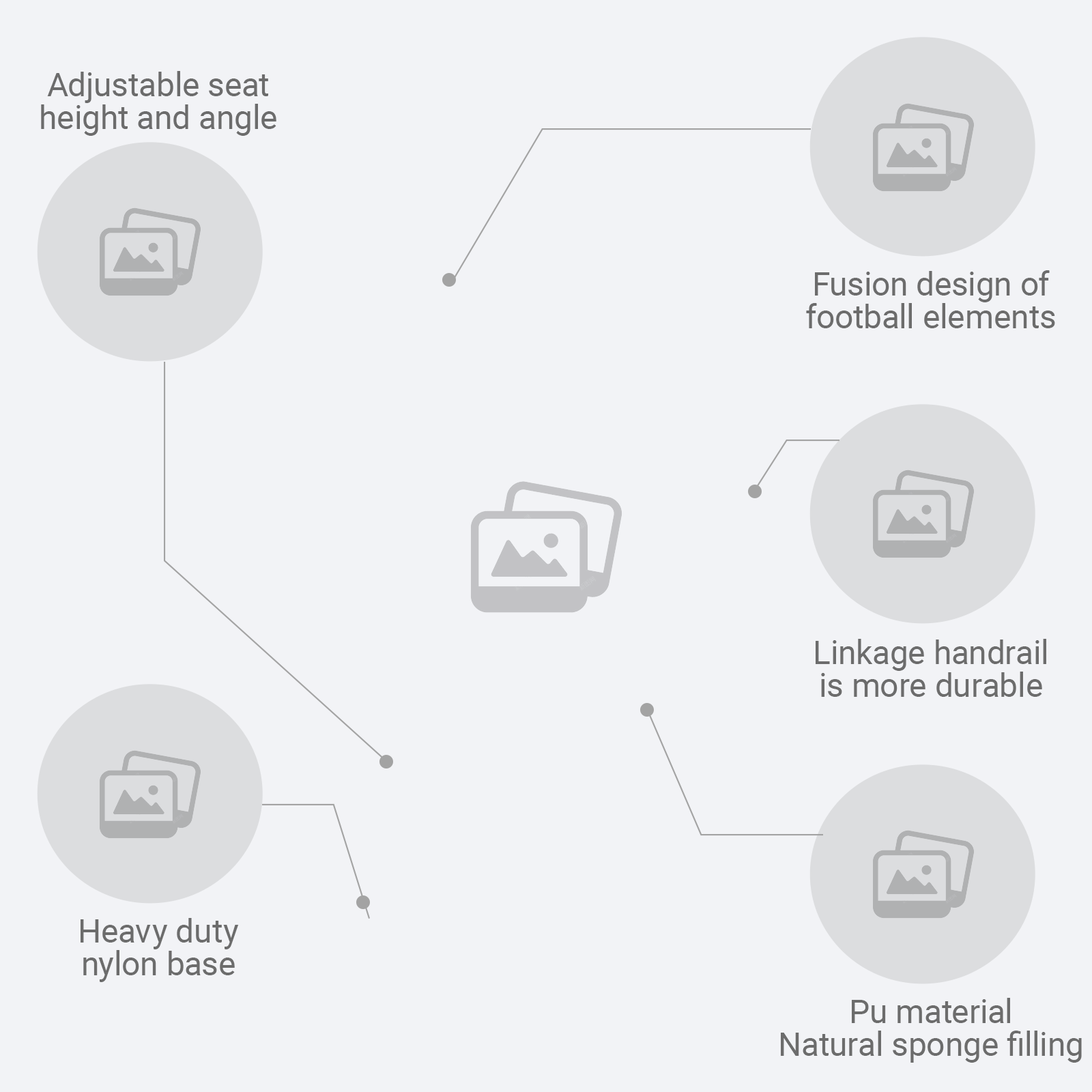
<style>
.page{position:relative;width:1092px;height:1092px;background:#f2f3f6}
.page>*{position:absolute;margin:0}
.t1{font:32.8px/32.8px "Roboto-Regular";color:#6c6c6c}
</style>
<div class="page">
<p class="t1" style="left:41px;top:71px;width:235px;height:65px;text-align:center">Adjustable seat<br>height and angle</p>
<p class="t1" style="left:806px;top:270px;width:249px;height:58px;text-align:center">Fusion design of<br>football elements</p>
<p class="t1" style="left:816px;top:639px;width:230px;height:58px;text-align:center">Linkage handrail<br>is more durable</p>
<p class="t1" style="left:81px;top:918px;width:158px;height:64px;text-align:center">Heavy duty<br>nylon base</p>
<p class="t1" style="left:781px;top:998px;width:301px;height:65px;text-align:center">Pu material<br>Natural sponge filling</p>
</div>
